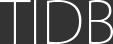
<style>
.page{position:relative;width:113px;height:44px;background:#333333}
.page>*{position:absolute;margin:0}
.t1{font:58px "KozGoPro-ExtraLight";color:#ffffff}
</style>
<div class="page">
<p class="t1" style="left:0px;top:0px;width:113px;height:44px">TIDB</p>
</div>
